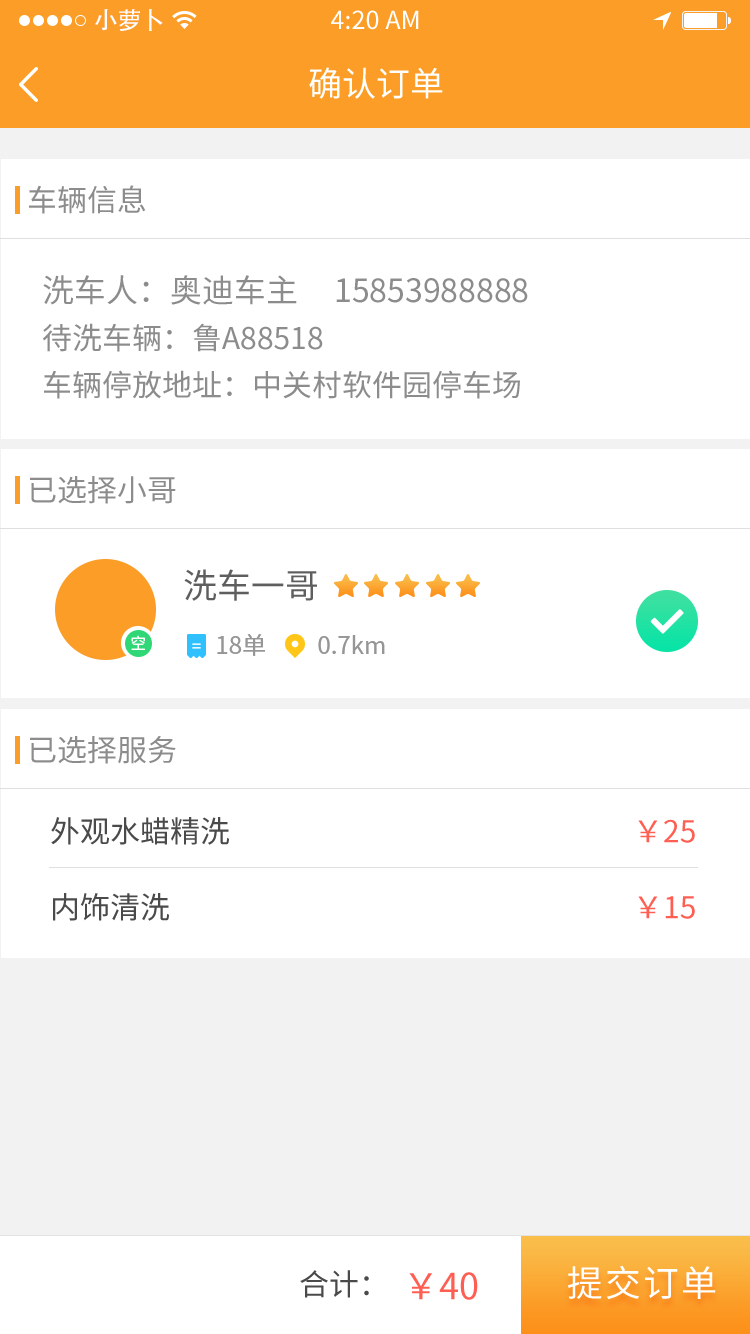
<style>
.page{position:relative;width:750px;height:1334px;background:#ffffff}
.page>*{position:absolute;margin:0}
.t1{font:24px "AdobeHeitiStd-Regular";color:#ffffff}
.t2{font:25px "SourceHanSansCN-Regular";color:#ffffff}
.t3{font:34px "SourceHanSansCN-Regular";color:#ffffff}
.t4{font:30px "SourceHanSansCN-Regular";color:#8c8c8c}
.t5{font:30px/47px "SourceHanSansCN-Regular";color:#8c8c8c}
.t6{font:32px "SourceHanSansCN-Regular";color:#8c8c8c}
.t7{font:34px "SourceHanSansCN-Regular";color:#5e5e5e}
.t8{font:16px "SourceHanSansCN-Regular";letter-spacing:0.06em;color:#ffffff}
.t9{font:24px "SourceHanSansCN-Regular";color:#969696}
.t10{font:30px/76px "SourceHanSansCN-Regular";color:#4a4a4a}
.t11{font:30px/76px "SourceHanSansCN-Regular";color:#ff5f52}
.t12{font:36px "SourceHanSansCN-Regular";letter-spacing:0.06em;color:#ffffff}
.t13{font:30px "SourceHanSansCN-Regular";color:#4a4a4a}
.t14{font:36px "SourceHanSansCN-Regular";color:#ff5f52}
</style>
<div class="page">
<p class="t1" style="left:95px;top:9px;width:68px;height:22px">小萝卜</p>
<p class="t2" style="left:331px;top:10px;width:88px;height:20px">4:20 AM</p>
<p class="t3" style="left:309px;top:67px;width:134px;height:32px">确认订单</p>
<p class="t4" style="left:29px;top:185px;width:117px;height:29px">车辆信息</p>
<p class="t5" style="left:42px;top:275px;width:486px;height:124px"><span class="t6">洗车人：奥迪车主     15853988888<br></span>待洗车辆：鲁A88518<br>车辆停放地址：中关村软件园停车场</p>
<p class="t4" style="left:30px;top:476px;width:146px;height:28px">已选择小哥</p>
<p class="t7" style="left:184px;top:569px;width:133px;height:32px">洗车一哥</p>
<p class="t8" style="left:131px;top:635px;width:14px;height:15px">空</p>
<p class="t9" style="left:217px;top:634px;width:48px;height:22px">18单</p>
<p class="t9" style="left:318px;top:635px;width:67px;height:19px">0.7km</p>
<p class="t4" style="left:30px;top:736px;width:146px;height:28px">已选择服务</p>
<p class="t10" style="left:51px;top:817px;width:178px;height:104px">外观水蜡精洗<br>内饰清洗</p>
<p class="t11" style="left:638px;top:819px;width:57px;height:100px">￥25<br>￥15</p>
<p class="t12" style="left:568px;top:1265px;width:148px;height:35px">提交订单</p>
<p class="t13" style="left:300px;top:1270px;width:69px;height:28px">合计：</p>
<p class="t14" style="left:409px;top:1272px;width:69px;height:28px">￥40</p>
</div>
